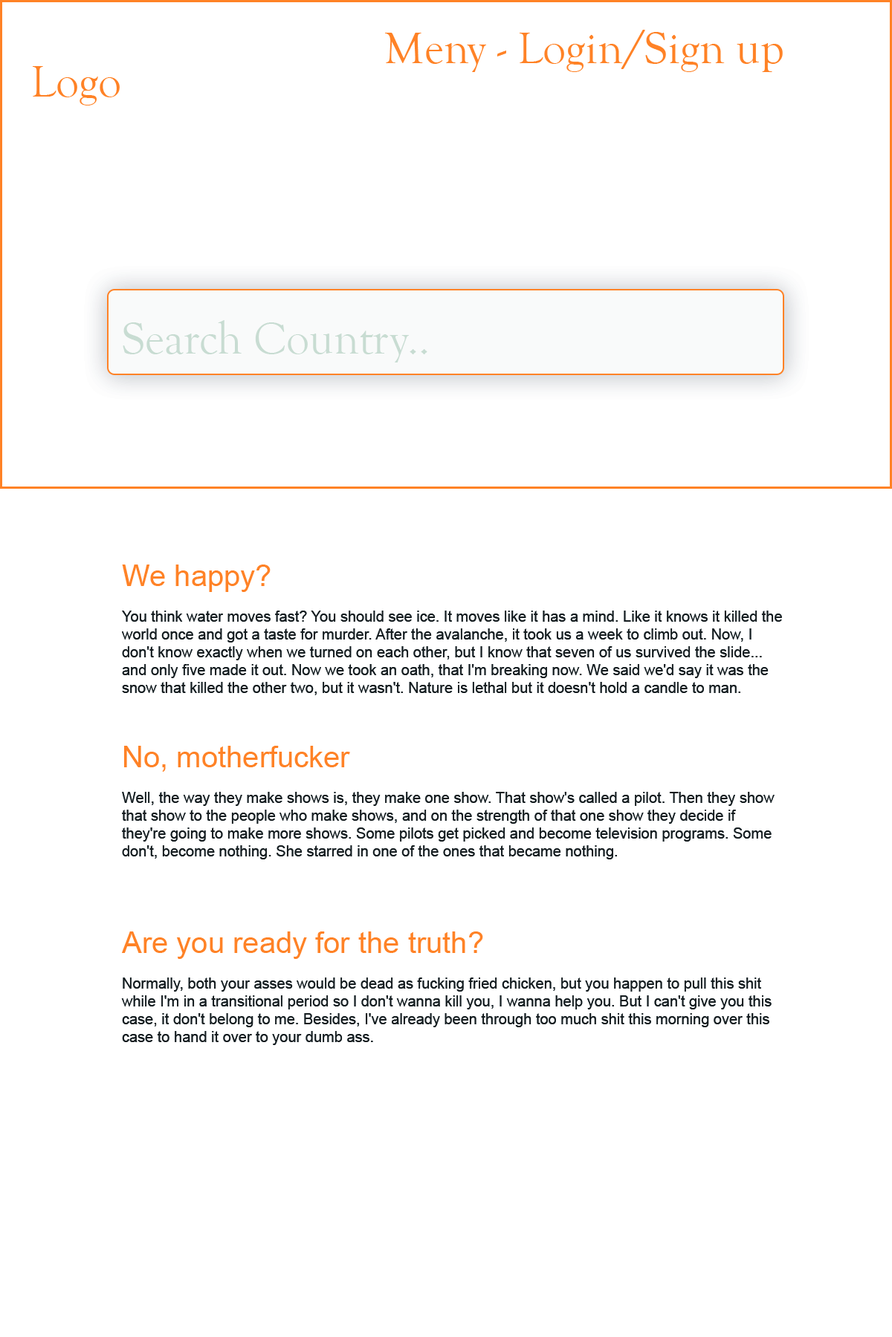
<style>
.page{position:relative;width:892px;height:1337px;background:#ffffff}
.page>*{position:absolute;margin:0}
.t1{font:46.1px "GoudyOldStyleT-Regular";color:#ff8226}
.t2{font:46.1px "GoudyOldStyleT-Regular";color:#c8dcd2}
.t3{font:14.9px/17.8px "ArialMT";color:#151c1f}
.t4{font:29.7px/17.8px "ArialMT";color:#ff8226}
</style>
<div class="page">
<p class="t1" style="left:385px;top:30px;width:397px;height:42px">Meny - Login/Sign up</p>
<p class="t1" style="left:33px;top:66px;width:87px;height:40px">Logo</p>
<p class="t2" style="left:123px;top:320px;width:304px;height:43px">Search Country..</p>
<p class="t3" style="left:122px;top:565px;width:660px;height:130px"><span class="t4">We happy?<br><br></span>You think water moves fast? You should see ice. It moves like it has a mind. Like it knows it killed the world once and got a taste for murder. After the avalanche, it took us a week to climb out. Now, I don't know exactly when we turned on each other, but I know that seven of us survived the slide... and only five made it out. Now we took an oath, that I'm breaking now. We said we'd say it was the snow that killed the other two, but it wasn't. Nature is lethal but it doesn't hold a candle to man.</p>
<p class="t3" style="left:122px;top:746px;width:652px;height:114px"><span class="t4">No, motherfucker<br><br></span>Well, the way they make shows is, they make one show. That show's called a pilot. Then they show that show to the people who make shows, and on the strength of that one show they decide if they're going to make more shows. Some pilots get picked and become television programs. Some don't, become nothing. She starred in one of the ones that became nothing.</p>
<p class="t3" style="left:121px;top:932px;width:650px;height:113px"><span class="t4">Are you ready for the truth?<br><br></span>Normally, both your asses would be dead as fucking fried chicken, but you happen to pull this shit while I'm in a transitional period so I don't wanna kill you, I wanna help you. But I can't give you this case, it don't belong to me. Besides, I've already been through too much shit this morning over this case to hand it over to your dumb ass.</p>
</div>
